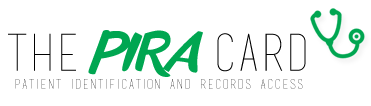
<style>
.page{position:relative;width:371px;height:106px;background:#ffffff}
.page>*{position:absolute;margin:0}
.t1{font:50.8px "anothershabby";color:#00a651}
.t2{font:50.8px "basictitlefont";color:#000000}
.t3{font:13.2px "basictitlefont";letter-spacing:0.075em}
</style>
<div class="page">
<p class="t1" style="left:8px;top:30px;width:298px;height:47px"><span class="t2">The </span>PIRA <span class="t2">Card</span></p>
<p class="t3" style="left:15px;top:79px;width:288px;height:10px">Patient Identification and Records Access</p>
</div>
